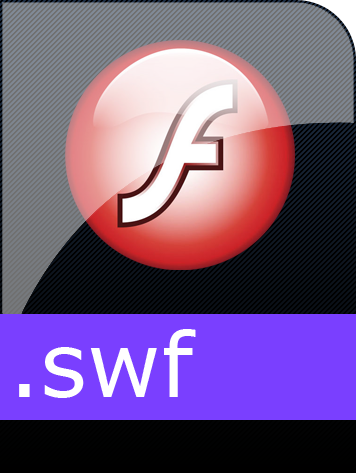
<style>
.page{position:relative;width:356px;height:473px;background:#7a3fff}
.page>*{position:absolute;margin:0}
.t1{font:90px "Verdana";color:#ffffff}
</style>
<div class="page">
<p class="t1" style="left:19px;top:329px;width:177px;height:69px">.swf</p>
</div>
